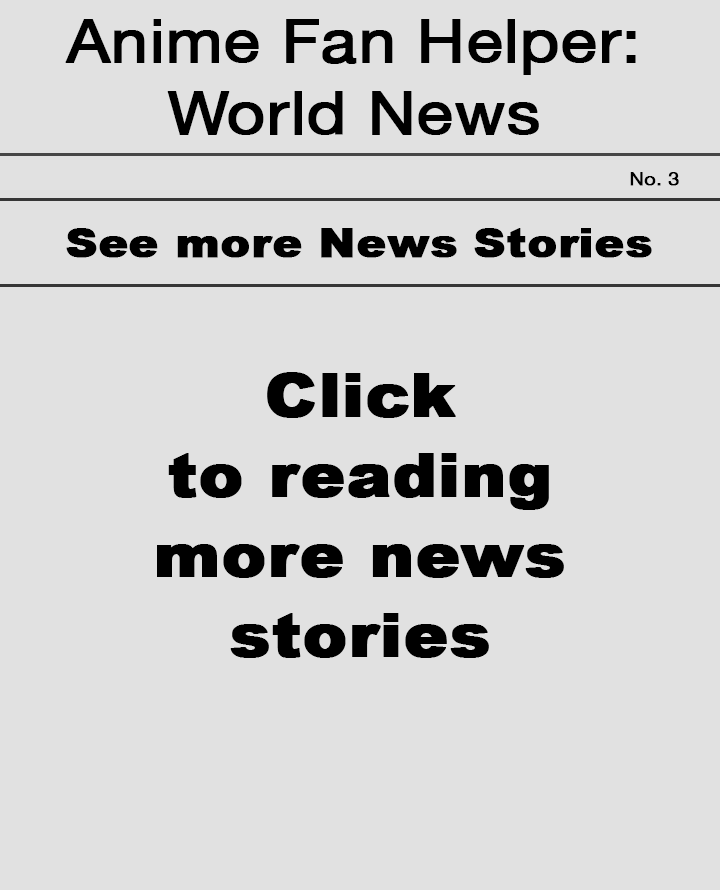
<style>
.page{position:relative;width:720px;height:890px;background:#e1e1e1}
.page>*{position:absolute;margin:0}
.t1{font:60px "HelveticaNeue";color:#000000;font-weight:bold;scale:1.1 1}
.t2{font:18px "HelveticaNeue";color:#000000;font-weight:bold;scale:1.1 1}
.t3{font:40px "Arial-Black";color:#000000;font-weight:bold;scale:1.1 1}
.t4{font:60px/80px "Arial-Black";color:#000000;font-weight:bold;scale:1.1 1}
</style>
<div class="page">
<p class="t1" style="left:65px;top:19px;width:571px;height:116px;text-align:center">Anime Fan Helper: World News</p>
<p class="t2" style="left:630px;top:172px;width:49px;height:14px">No. 3</p>
<p class="t3" style="left:66px;top:228px;width:586px;height:30px">See more News Stories</p>
<p class="t4" style="left:157px;top:372px;width:407px;height:286px;text-align:center">Click <br>to reading<br>more news <br>stories</p>
</div>
